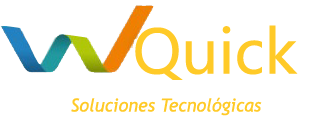
<style>
.page{position:relative;width:311px;height:116px;background:#ffffff}
.page>*{position:absolute;margin:0}
.t1{font:60px "MicrosoftYaHeiUI";color:#ffca28}
.t2{font:18px "TrebuchetMS-Italic";color:#ffca28}
</style>
<div class="page">
<p class="t1" style="left:135px;top:25px;width:163px;height:55px">Quick</p>
<p class="t2" style="left:71px;top:97px;width:191px;height:19px">Soluciones Tecnológicas</p>
</div>
